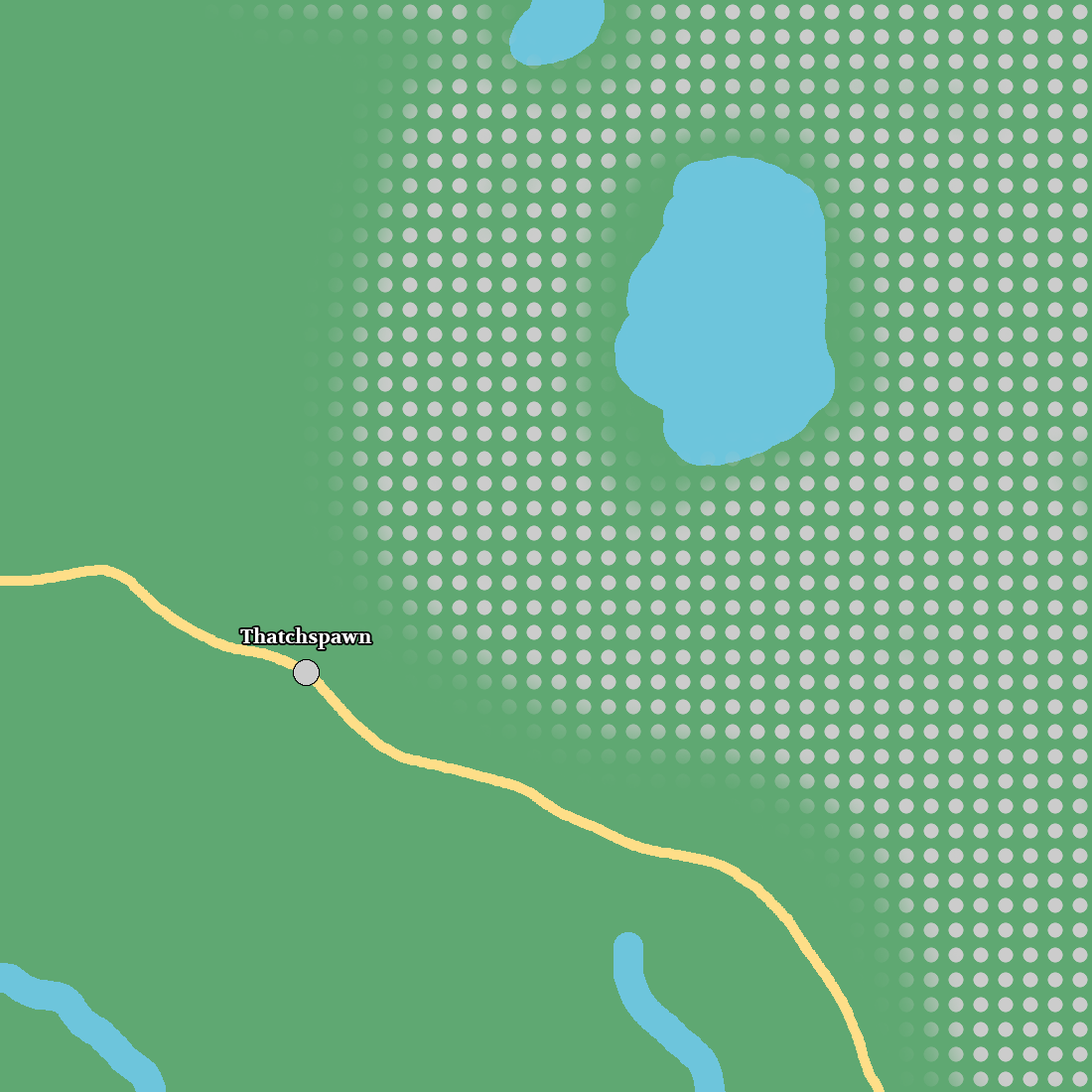
<style>
.page{position:relative;width:1092px;height:1092px;background:#5fa872}
.page>*{position:absolute;margin:0}
.t1{font:19.9px "Volkhov-Bold";color:#ffffff}
</style>
<div class="page">
<p class="t1" style="left:240px;top:627px;width:132px;height:22px">Thatchspawn</p>
</div>
